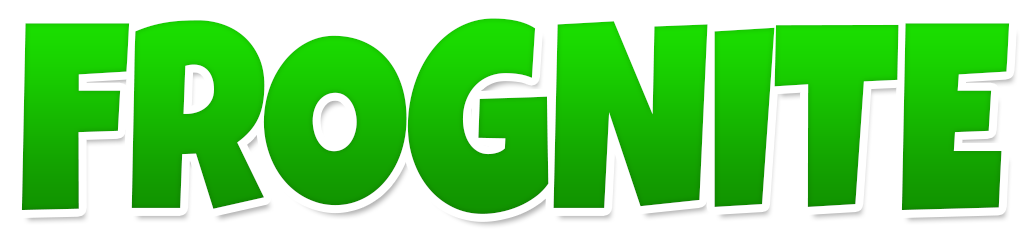
<style>
.page{position:relative;width:1030px;height:230px;background:#ffffff}
.page>*{position:absolute;margin:0}
.t1{font:264.5px "LuckiestGuy-Regular";letter-spacing:-0.01em;text-transform:uppercase;scale:0.87 1}
</style>
<div class="page">
<p class="t1" style="left:21px;top:18px;width:989px;height:196px">frognite</p>
</div>
